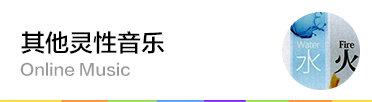
<style>
.page{position:relative;width:372px;height:102px;background:#ffffff}
.page>*{position:absolute;margin:0}
.t1{font:24px "FZLTZHK--GBK1-0";color:#000000}
.t2{font:16px "FZLTZHK--GBK1-0";color:#999999}
</style>
<div class="page">
<p class="t1" style="left:21px;top:31px;width:144px;height:23px">其他灵性音乐</p>
<p class="t2" style="left:20px;top:62px;width:110px;height:14px">Online Music</p>
</div>
